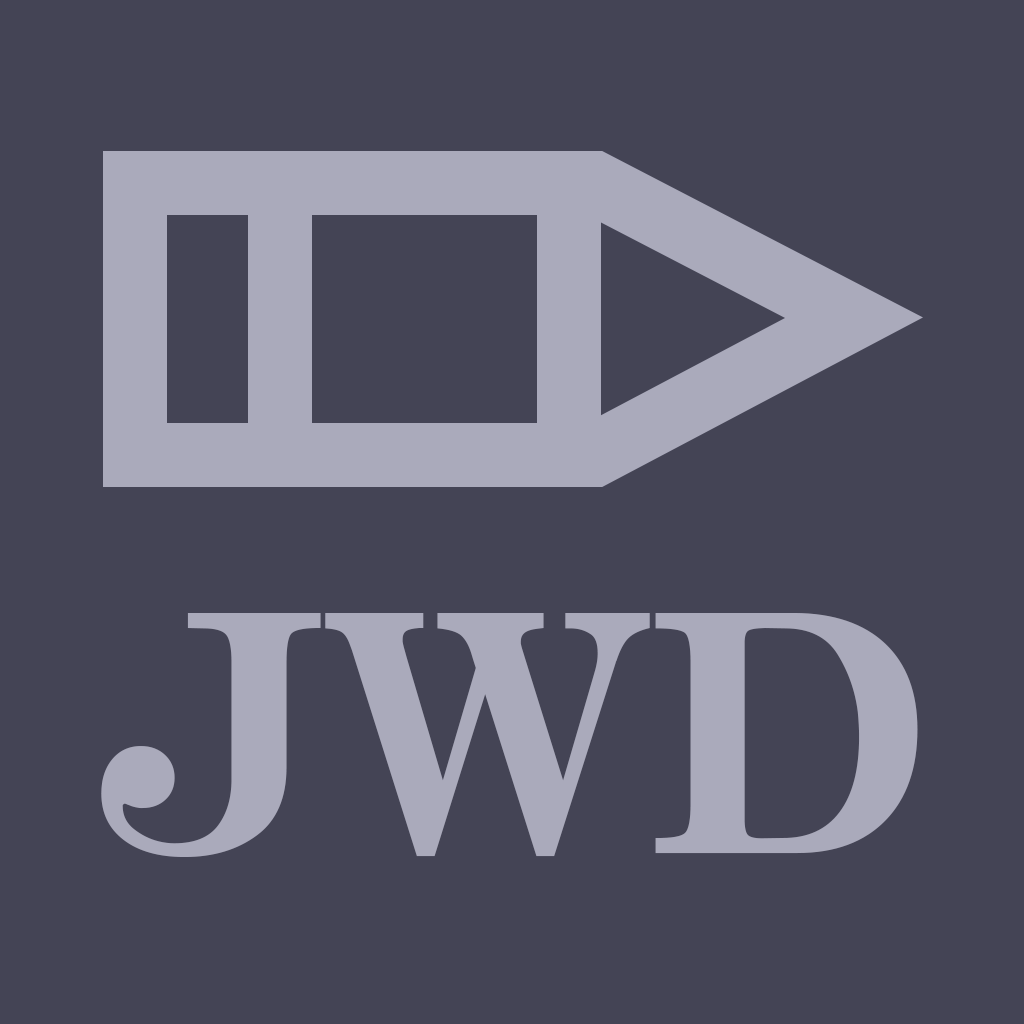
<style>
.page{position:relative;width:1024px;height:1024px;background:#444455}
.page>*{position:absolute;margin:0}
.t1{font:333.2px "CenturySchoolbook";color:#aaaabb}
</style>
<div class="page">
<p class="t1" style="left:101px;top:613px;width:817px;height:244px">JWD</p>
</div>
